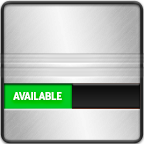
<style>
.page{position:relative;width:144px;height:144px}
.page>*{position:absolute;margin:0}
.t1{font:11.4px "Antartida-Black";color:#ffffff;scale:0.9 1}
</style>
<div class="page">
<p class="t1" style="left:13px;top:92px;width:49px;height:8px">AVAILABLE</p>
</div>
